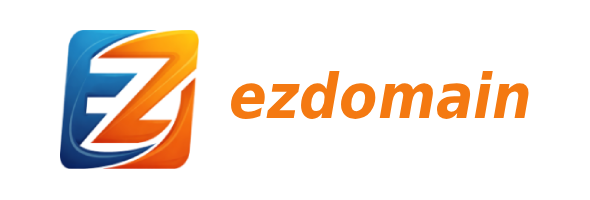
<style>
.page{position:relative;width:590px;height:200px;background:#ffffff}
.page>*{position:absolute;margin:0}
.t1{font:62px "DejaVuSansCondensed-BoldOblique";color:#f47911}
</style>
<div class="page">
<p class="t1" style="left:231px;top:70px;width:298px;height:49px">ezdomain</p>
</div>
